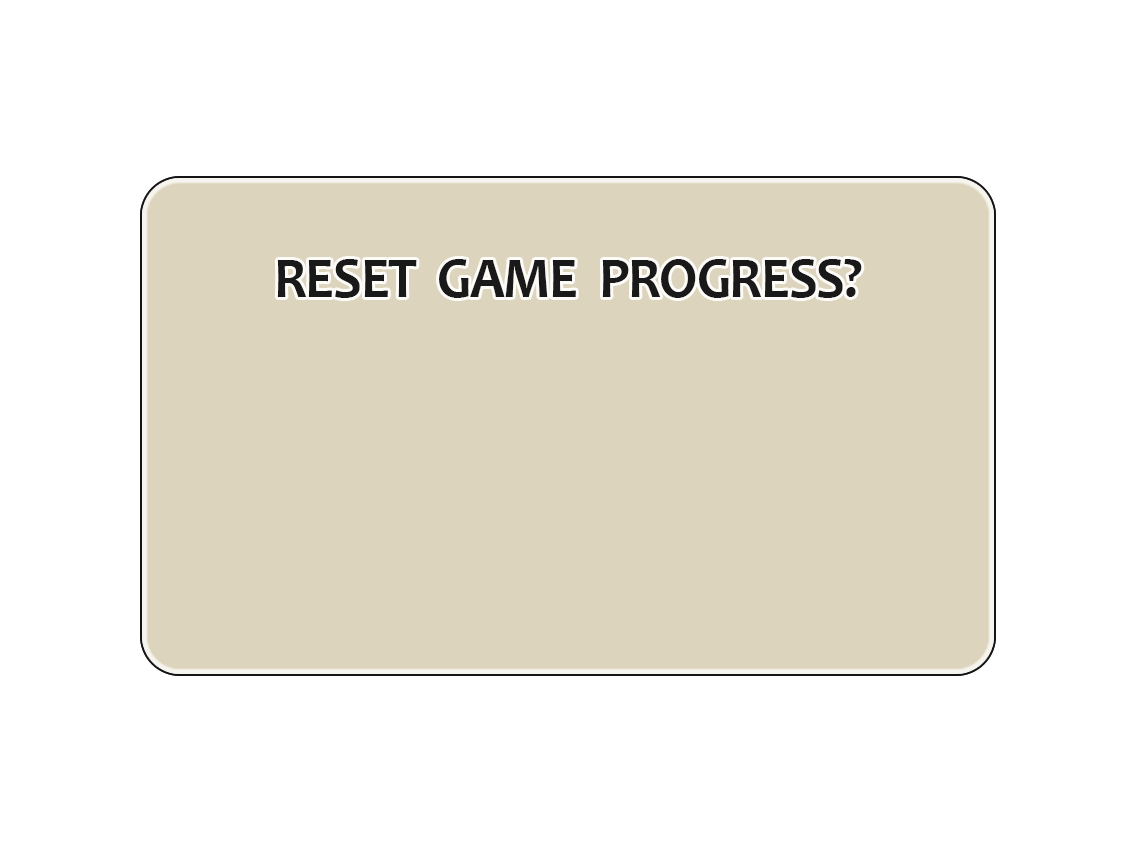
<style>
.page{position:relative;width:1136px;height:852px;background:#ffffff}
.page>*{position:absolute;margin:0}
.t1{font:57.8px "Candara-Bold";letter-spacing:-0.02em;color:#191919;scale:0.94 1}
</style>
<div class="page">
<p class="t1" style="left:277px;top:259px;width:585px;height:39px">RESET  GAME  PROGRESS?</p>
</div>
